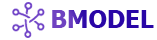
<style>
.page{position:relative;width:157px;height:40px;background:#ffffff}
.page>*{position:absolute;margin:0}
.t1{font:24px "Tahoma-Bold";color:#2906a6}
</style>
<div class="page">
<p class="t1" style="left:52px;top:10px;width:102px;height:18px">BMODEL</p>
</div>
